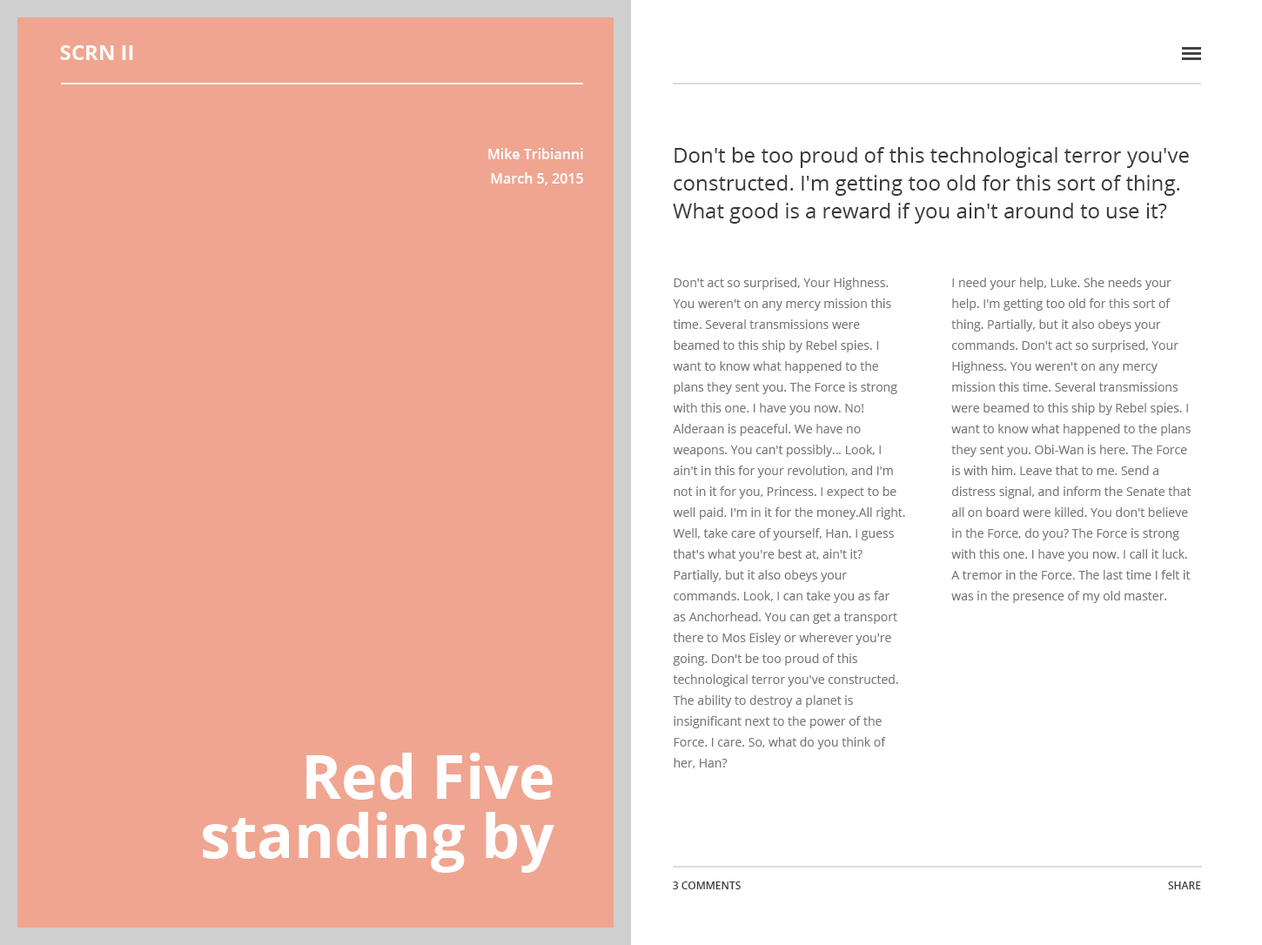
<style>
.page{position:relative;width:1262px;height:945px;background:#ffffff}
.page>*{position:absolute;margin:0}
.t1{font:20.9px "OpenSans-Bold";color:#f9f9f9;text-transform:uppercase}
.t2{font:13.9px/24.4px "OpenSans-Semibold";color:#ffffff}
.t3{font:20.9px/27.8px "OpenSans";color:#3a3a3a}
.t4{font:12.2px/20.9px "OpenSans";color:#777777}
.t5{font:60.9px/59.2px "OpenSans-Bold";color:#ffffff}
.t6{font:10.4px "OpenSans-Semibold";color:#3a3a3a;text-transform:uppercase}
</style>
<div class="page">
<p class="t1" style="left:60px;top:45px;width:73px;height:15px">scrn II</p>
<p class="t2" style="left:488px;top:148px;width:95px;height:37px;text-align:right">Mike Tribianni<br>March 5, 2015</p>
<p class="t3" style="left:673px;top:147px;width:516px;height:77px">Don't be too proud of this technological terror you've <br>constructed. I'm getting too old for this sort of thing. <br>What good is a reward if you ain't around to use it?</p>
<p class="t4" style="left:673px;top:278px;width:232px;height:490px">Don't act so surprised, Your Highness. <br>You weren't on any mercy mission this <br>time. Several transmissions were <br>beamed to this ship by Rebel spies. I <br>want to know what happened to the <br>plans they sent you. The Force is strong <br>with this one. I have you now. No! <br>Alderaan is peaceful. We have no <br>weapons. You can't possibly… Look, I <br>ain't in this for your revolution, and I'm <br>not in it for you, Princess. I expect to be <br>well paid. I'm in it for the money.All right. <br>Well, take care of yourself, Han. I guess <br>that's what you're best at, ain't it? <br>Partially, but it also obeys your <br>commands. Look, I can take you as far <br>as Anchorhead. You can get a transport <br>there to Mos Eisley or wherever you're <br>going. Don't be too proud of this <br>technological terror you've constructed. <br>The ability to destroy a planet is <br>insignificant next to the power of the <br>Force. I care. So, what do you think of <br>her, Han?</p>
<p class="t4" style="left:951px;top:278px;width:240px;height:325px">I need your help, Luke. She needs your <br>help. I'm getting too old for this sort of <br>thing. Partially, but it also obeys your <br>commands. Don't act so surprised, Your <br>Highness. You weren't on any mercy <br>mission this time. Several transmissions <br>were beamed to this ship by Rebel spies. I <br>want to know what happened to the plans <br>they sent you. Obi-Wan is here. The Force <br>is with him. Leave that to me. Send a <br>distress signal, and inform the Senate that <br>all on board were killed. You don't believe <br>in the Force, do you? The Force is strong <br>with this one. I have you now. I call it luck. <br>A tremor in the Force. The last time I felt it <br>was in the presence of my old master.</p>
<p class="t5" style="left:203px;top:753px;width:351px;height:120px;text-align:right">Red Five<br> standing by</p>
<p class="t6" style="left:673px;top:882px;width:68px;height:7px">3 comments</p>
<p class="t6" style="left:1168px;top:882px;width:33px;height:7px">Share</p>
</div>
